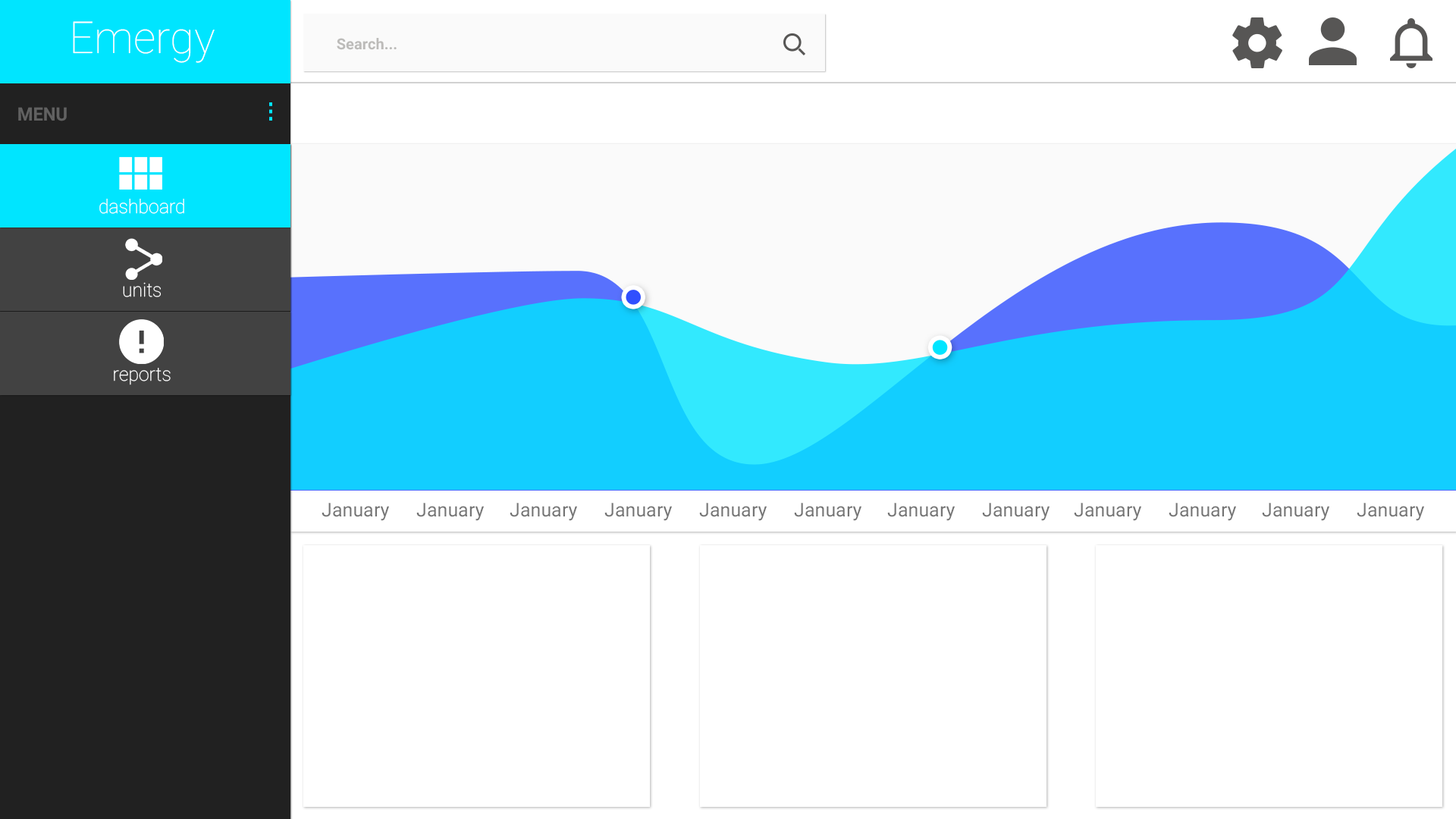
<style>
.page{position:relative;width:1456px;height:819px;background:#ffffff}
.page>*{position:absolute;margin:0}
.t1{font:44.2px "Roboto-Thin";color:#ffffff}
.t2{font:15.2px "Roboto-Bold";color:#bcbbb9}
.t3{font:18.3px "Roboto-Bold";color:#616161}
.t4{font:19px "Roboto-Thin";color:#ffffff}
.t5{font:19px "Roboto-Regular";color:#757575}
</style>
<div class="page">
<p class="t1" style="left:73px;top:21px;width:142px;height:42px">Emergy</p>
<p class="t2" style="left:337px;top:38px;width:60px;height:12px">Search...</p>
<p class="t3" style="left:18px;top:107px;width:49px;height:14px">MENU</p>
<p class="t4" style="left:99px;top:199px;width:85px;height:15px">dashboard</p>
<p class="t4" style="left:123px;top:282px;width:38px;height:15px">units</p>
<p class="t4" style="left:114px;top:368px;width:57px;height:17px">reports</p>
<p class="t5" style="left:322px;top:503px;width:67px;height:18px">January</p>
<p class="t5" style="left:416px;top:503px;width:68px;height:18px">January</p>
<p class="t5" style="left:510px;top:503px;width:67px;height:18px">January</p>
<p class="t5" style="left:604px;top:503px;width:68px;height:18px">January</p>
<p class="t5" style="left:699px;top:503px;width:68px;height:18px">January</p>
<p class="t5" style="left:794px;top:503px;width:67px;height:18px">January</p>
<p class="t5" style="left:887px;top:503px;width:68px;height:18px">January</p>
<p class="t5" style="left:982px;top:503px;width:68px;height:18px">January</p>
<p class="t5" style="left:1074px;top:503px;width:67px;height:18px">January</p>
<p class="t5" style="left:1169px;top:503px;width:67px;height:18px">January</p>
<p class="t5" style="left:1262px;top:503px;width:67px;height:18px">January</p>
<p class="t5" style="left:1357px;top:503px;width:67px;height:18px">January</p>
</div>
